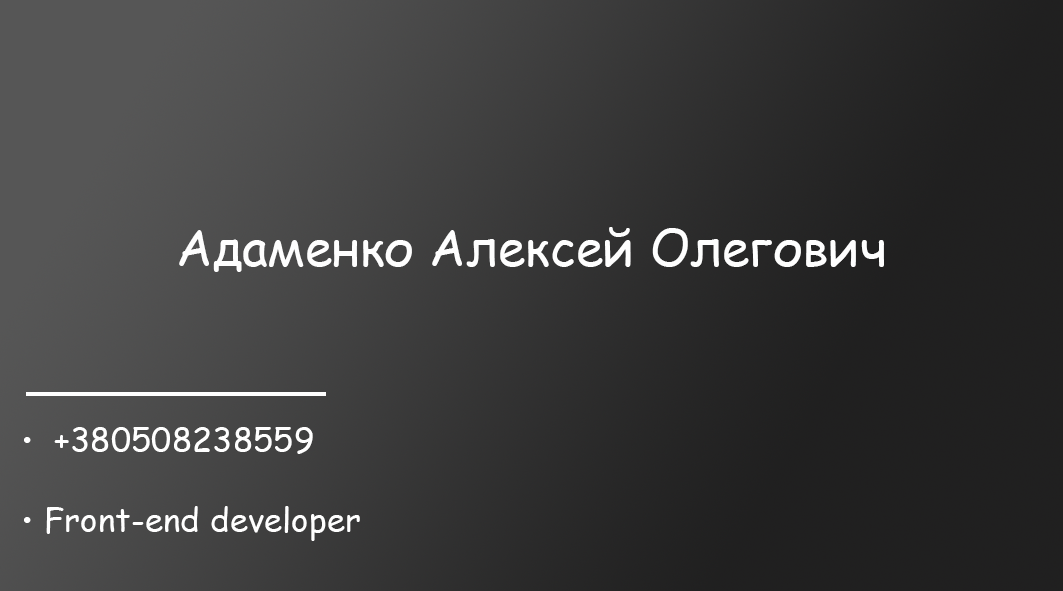
<style>
.page{position:relative;width:1063px;height:591px}
.page>*{position:absolute;margin:0}
.t1{font:50px "ComicSansMS";color:#fefefe}
.t2{font:33.3px "ComicSansMS";color:#ffffff}
</style>
<div class="page">
<p class="t1" style="left:179px;top:227px;width:705px;height:45px">Адаменко Алексей Олегович</p>
<p class="t2" style="left:24px;top:427px;width:336px;height:114px">•  +380508238559<br><br>• Front-end developer</p>
</div>
